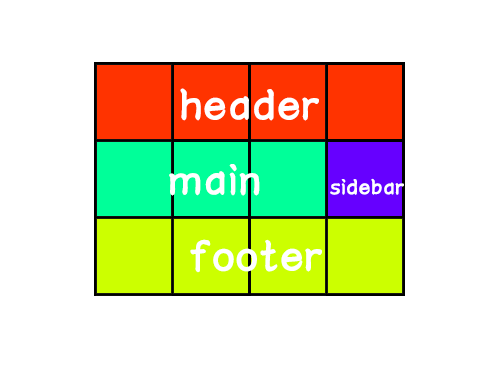
<style>
.page{position:relative;width:500px;height:380px;background:#ffffff}
.page>*{position:absolute;margin:0}
.t1{font:48px "Untitled";color:#ffffff;font-weight:bold}
.t2{font:24px "Untitled";color:#ffffff;font-weight:bold}
</style>
<div class="page">
<p class="t1" style="left:180px;top:88px;width:139px;height:33px">header</p>
<p class="t1" style="left:169px;top:164px;width:91px;height:32px">main</p>
<p class="t2" style="left:330px;top:178px;width:74px;height:17px">sidebar</p>
<p class="t1" style="left:190px;top:239px;width:132px;height:34px">footer</p>
</div>
